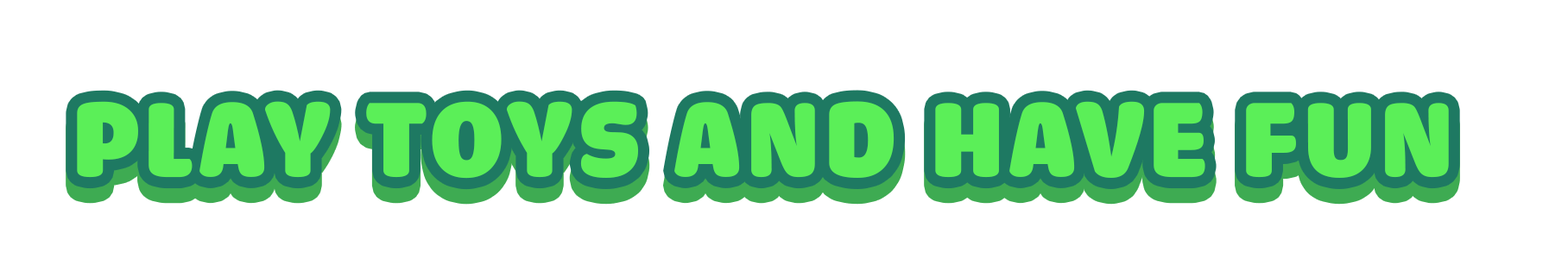
<style>
.page{position:relative;width:1568px;height:278px;background:#ffffff}
.page>*{position:absolute;margin:0}
.t1{font:112.2px "iCielCadena";letter-spacing:0.05em;color:#5bef58;text-transform:uppercase}
</style>
<div class="page">
<p class="t1" style="left:77px;top:101px;width:1372px;height:78px">Play toys and have fun</p>
</div>
